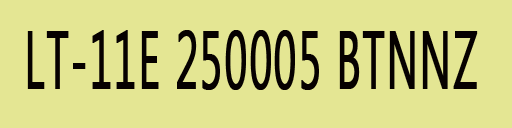
<style>
.page{position:relative;width:512px;height:128px;background:#e4e693}
.page>*{position:absolute;margin:0}
.t1{font:80.5px "SegoeUI";letter-spacing:0.02em;color:#060100;font-weight:bold;scale:0.52 1}
</style>
<div class="page">
<p class="t1" style="left:27px;top:30px;width:451px;height:60px">LT-11E 250005 BTNNZ</p>
</div>
